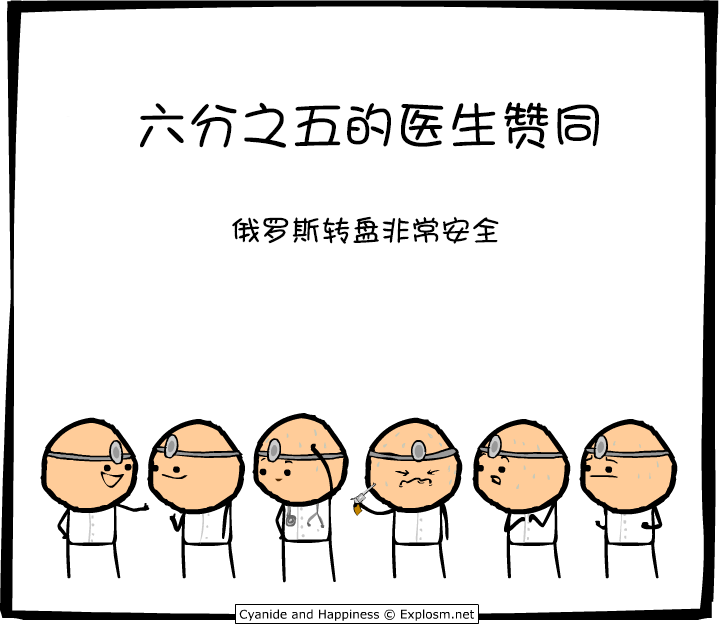
<style>
.page{position:relative;width:720px;height:625px;background:#ffffff}
.page>*{position:absolute;margin:0}
.t1{font:52px "DFGirl";color:#000000}
.t2{font:30px "DFGirl";color:#000000}
</style>
<div class="page">
<p class="t1" style="left:140px;top:101px;width:459px;height:48px">六分之五的医生赞同</p>
<p class="t2" style="left:232px;top:216px;width:267px;height:28px">俄罗斯转盘非常安全</p>
</div>
